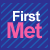
<style>
.page{position:relative;width:50px;height:50px;background:#2e3192}
.page>*{position:absolute;margin:0}
.t1{font:14px "Arial-BoldMT";letter-spacing:-0.04em;color:#fafcfd}
.t2{font:22px "Arial-BoldMT";letter-spacing:-0.04em;color:#f75ca3}
</style>
<div class="page">
<p class="t1" style="left:13px;top:11px;width:28px;height:11px">First</p>
<p class="t2" style="left:7px;top:22px;width:35px;height:17px">Met</p>
</div>
